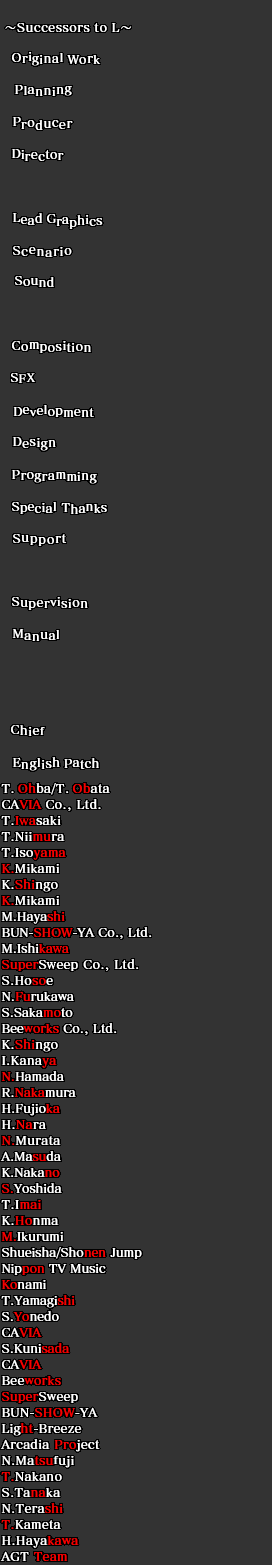
<style>
.page{position:relative;width:272px;height:1565px;background:#333333}
.page>*{position:absolute;margin:0}
.t1{font:12px "MatisseVPro-DB";letter-spacing:0.05em;color:#ffffff}
.t2{font:12px "MatisseVPro-DB";letter-spacing:0.005em;color:#ffffff}
.t3{font:12px "MatisseVPro-DB";color:#ffffff}
.t4{font:12px "MatisseVPro-DB";letter-spacing:0.075em;color:#ffffff}
.t5{font:12px "MatisseVPro-DB";letter-spacing:0.025em;color:#ffffff}
.t6{font:12px "MatisseVPro-DB";letter-spacing:-0.025em;color:#ffffff}
.t7{font:11.5px "MatisseVPro-DB";letter-spacing:0.05em;color:#ffffff}
.t8{font:12px/16px "MatisseVPro-DB";color:#ffffff}
.t9{font:12px/16px "MatisseVPro-DB";letter-spacing:0.025em;color:#ffffff}
.t10{font:12px/16px "MatisseVPro-DB";letter-spacing:0.025em;color:#f80000}
.t11{font:12.6px/16px "MatisseVPro-DB";letter-spacing:0.025em;color:#f80000;scale:0.95 1}
.t12{font:12px/16px "MatisseVPro-DB";color:#f80000}
.t13{font:13.2px/16px "MatisseVPro-DB";color:#f80000;scale:0.91 1}
.t14{font:13.2px/16px "MatisseVPro-DB";letter-spacing:0.025em;color:#ffffff;scale:0.91 1}
</style>
<div class="page">
<p class="t1" style="left:5px;top:23px;width:127px;height:9px">～Successors to L～</p>
<p class="t1" style="left:12px;top:52px;width:89px;height:14px">Or<span class="t2">i</span>ginal <span class="t3">W</span>ork</p>
<p class="t1" style="left:14px;top:85px;width:58px;height:11px">Planning</p>
<p class="t1" style="left:12px;top:117px;width:61px;height:13px"><span class="t3">P</span><span class="t4">r</span>oducer</p>
<p class="t5" style="left:11px;top:149px;width:53px;height:12px">D<span class="t3">i</span><span class="t1">re</span>ctor</p>
<p class="t5" style="left:12px;top:213px;width:91px;height:16px">Lead <span class="t6">G</span>raphi<span class="t1">c</span>s</p>
<p class="t4" style="left:13px;top:246px;width:59px;height:11px">Scenario</p>
<p class="t5" style="left:15px;top:276px;width:39px;height:11px">Sound</p>
<p class="t1" style="left:12px;top:341px;width:79px;height:12px">Co<span class="t2">m</span>posi<span class="t3">t</span>ion</p>
<p class="t7" style="left:10px;top:373px;width:26px;height:10px">SFX</p>
<p class="t5" style="left:13px;top:405px;width:81px;height:12px">De<span class="t1">v</span>elopment</p>
<p class="t1" style="left:12px;top:437px;width:44px;height:14px">Design</p>
<p class="t1" style="left:11px;top:470px;width:86px;height:14px">Pr<span class="t2">o</span>gram<span class="t3">m</span>ing</p>
<p class="t5" style="left:12px;top:502px;width:95px;height:12px">Special Thanks</p>
<p class="t4" style="left:13px;top:534px;width:54px;height:12px">Support</p>
<p class="t1" style="left:12px;top:597px;width:76px;height:13px">Supervision</p>
<p class="t1" style="left:12px;top:629px;width:48px;height:12px">Manual</p>
<p class="t1" style="left:11px;top:725px;width:34px;height:11px">Chief</p>
<p class="t1" style="left:12px;top:757px;width:87px;height:14px"><span class="t3">E</span><span class="t4">n</span>glish <span class="t5">Patch</span></p>
<p class="t8" style="left:0px;top:783px;width:152px;height:778px"><span class="t9">T. </span><span class="t10">Oh</span><span class="t9">ba/T. </span><span class="t10">Ob</span><span class="t9">ata<br>CA</span><span class="t10">VIA </span><span class="t9">Co., Ltd.<br>T.</span><span class="t10">I</span><span class="t11">w</span><span class="t10">a</span><span class="t9">saki<br>T.Nii</span><span class="t10">mu</span><span class="t9">ra<br>T.Iso</span><span class="t10">yama<br>K.</span><span class="t9">Mikami<br>K.</span><span class="t10">Shi</span><span class="t9">ngo<br></span><span class="t10">K.</span><span class="t9">Mikami<br></span>M.Haya<span class="t12">shi<br></span>BUN-<span class="t12">SHOW</span>-YA Co., Ltd.<br>M.Ishi<span class="t12">ka</span><span class="t13">w</span><span class="t12">a<br></span><span class="t10">Super</span><span class="t9">S</span><span class="t14">w</span><span class="t9">eep Co., Ltd</span>.<br><span class="t9">S.Ho</span><span class="t10">so</span><span class="t9">e<br></span>N.<span class="t12">Fu</span>rukawa<br>S.Saka<span class="t12">mo</span>to<br>Bee<span class="t12">works</span> Co., Ltd.<br><span class="t9">K.</span><span class="t10">Shi</span><span class="t9">ngo<br>I.Kana</span><span class="t10">ya<br></span><span class="t12">N.</span>Hamada<br>R.<span class="t12">Naka</span>mura<br>H.Fujio<span class="t12">ka<br></span><span class="t9">H.</span><span class="t10">Na</span><span class="t9">ra<br></span><span class="t10">N.</span><span class="t9">Murata<br></span>A.Ma<span class="t12">su</span>da<br>K.Naka<span class="t12">no<br>S.</span>Yoshida<br><span class="t9">T.I</span><span class="t10">mai<br></span><span class="t9">K.</span><span class="t10">Ho</span><span class="t9">nma<br></span><span class="t12">M.</span>Ikurumi<br>Shueisha/Sho<span class="t12">nen</span> Jump<br>Nip<span class="t12">pon</span> TV Music<br><span class="t12">Ko</span>nami<br>T.Yamagi<span class="t12">shi<br></span>S.<span class="t12">Yo</span>nedo<br><span class="t9">CA</span><span class="t10">VIA<br></span>S.Kuni<span class="t12">sada<br></span><span class="t9">CA</span><span class="t10">VIA<br></span><span class="t9">Bee</span><span class="t10">works<br>Super</span><span class="t9">Sweep<br>BUN-</span><span class="t10">SHOW</span><span class="t9">-YA<br>Lig</span><span class="t10">ht</span><span class="t9">-Breeze<br>Arcadia </span><span class="t10">Pro</span><span class="t9">ject<br>N.Ma</span><span class="t10">tsu</span><span class="t9">fuji<br></span><span class="t10">T.</span><span class="t9">Nakano<br>S.Ta</span><span class="t10">na</span><span class="t9">ka<br>N.Tera</span><span class="t10">shi<br>T.</span><span class="t9">Kameta<br>H.Haya</span><span class="t10">kawa<br></span><span class="t9">AGT </span><span class="t10">Team</span></p>
</div>
